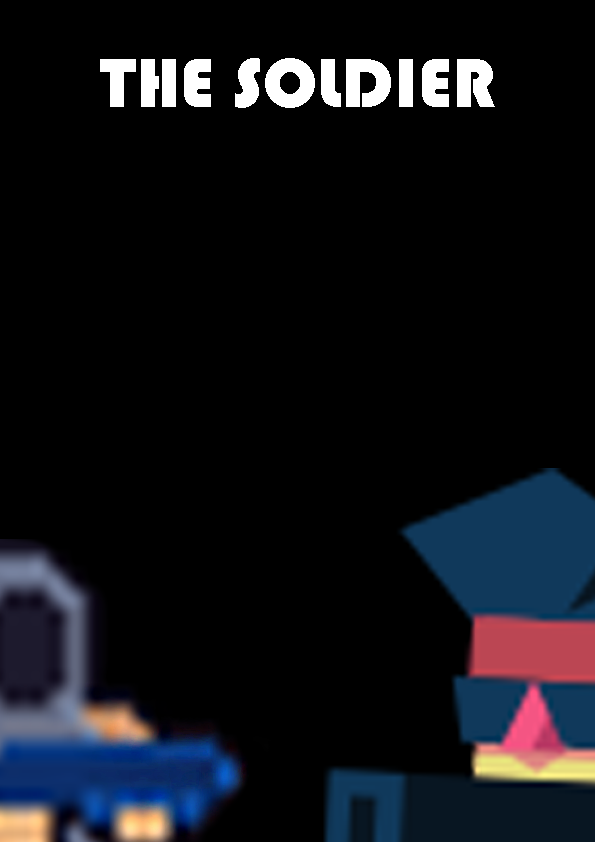
<style>
.page{position:relative;width:595px;height:842px;background:#000000}
.page>*{position:absolute;margin:0}
.t1{font:72px "Bauhaus93";color:#ffffff}
</style>
<div class="page">
<p class="t1" style="left:100px;top:58px;width:395px;height:50px">THE SOLDIER</p>
</div>
